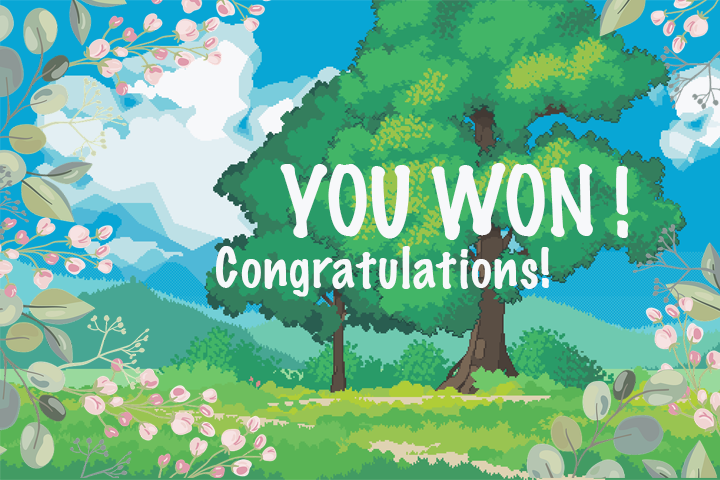
<style>
.page{position:relative;width:720px;height:480px}
.page>*{position:absolute;margin:0}
.t1{font:86.4px "MarkerFelt-Thin";color:#f7f8fa;scale:0.92 1}
.t2{font:50px "MarkerFelt-Thin";color:#f7f8fa}
</style>
<div class="page">
<p class="t1" style="left:280px;top:163px;width:349px;height:77px">YOU WON !</p>
<p class="t2" style="left:216px;top:246px;width:333px;height:51px">Congratulations!</p>
</div>
